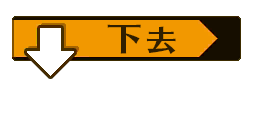
<style>
.page{position:relative;width:256px;height:128px;background:#ffffff}
.page>*{position:absolute;margin:0}
.t1{font:33.3px "SkipStd-B";letter-spacing:0.125em;color:#301f00;scale:1.1 1}
.t2{font:29.3px "SkipStd-B";letter-spacing:0.125em;color:#301f00;scale:1.1 1}
</style>
<div class="page">
<p class="t1" style="left:107px;top:24px;width:34px;height:30px">下</p>
<p class="t2" style="left:146px;top:26px;width:30px;height:28px">去</p>
</div>
